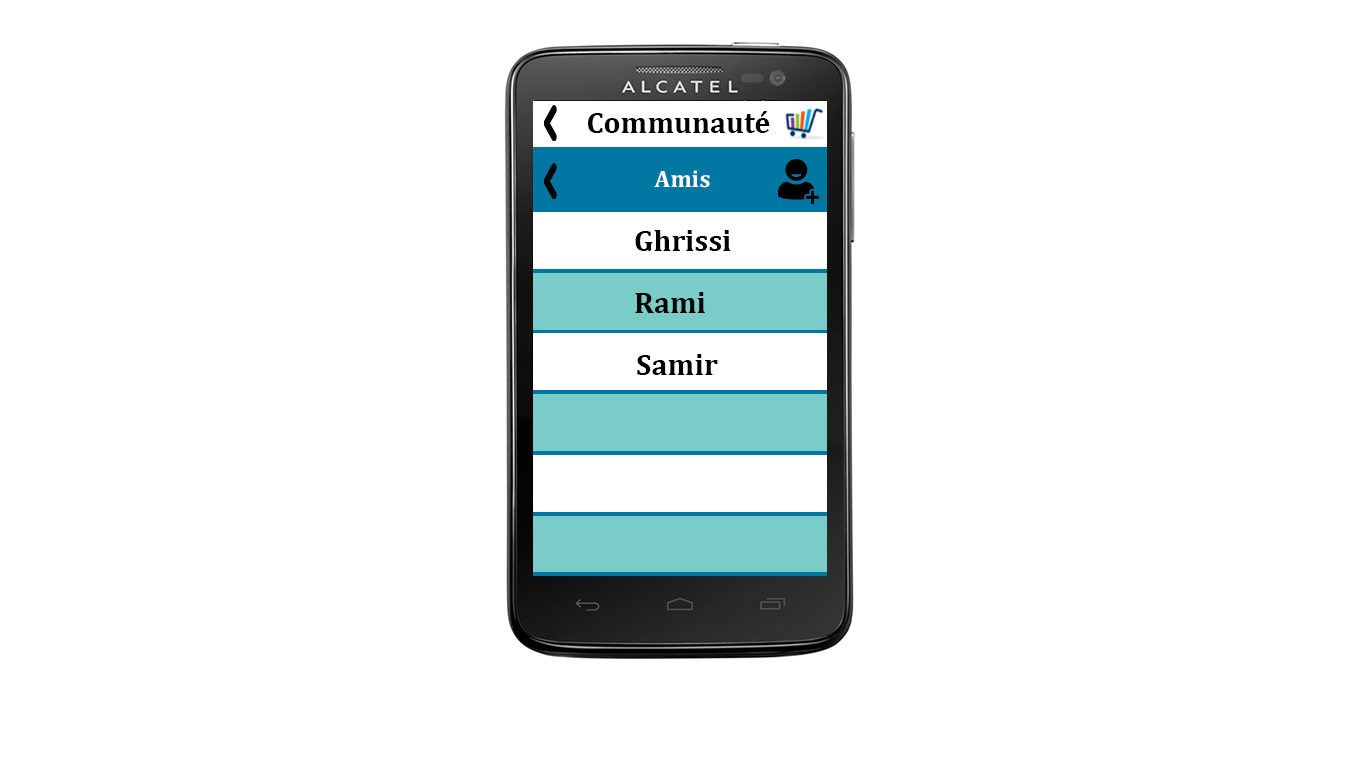
<style>
.page{position:relative;width:1366px;height:768px;background:#ffffff}
.page>*{position:absolute;margin:0}
.t1{font:30px "Cambria-Bold";color:#000101}
.t2{font:23.9px "Cambria-Bold";color:#ffffff}
.t3{font:30px "Cambria-Bold";color:#000000}
</style>
<div class="page">
<p class="t1" style="left:588px;top:111px;width:182px;height:22px">Communauté</p>
<p class="t2" style="left:654px;top:170px;width:56px;height:18px">Amis</p>
<p class="t3" style="left:635px;top:230px;width:96px;height:21px">Ghrissi</p>
<p class="t3" style="left:635px;top:292px;width:70px;height:21px">Rami</p>
<p class="t3" style="left:637px;top:354px;width:81px;height:21px">Samir</p>
</div>
